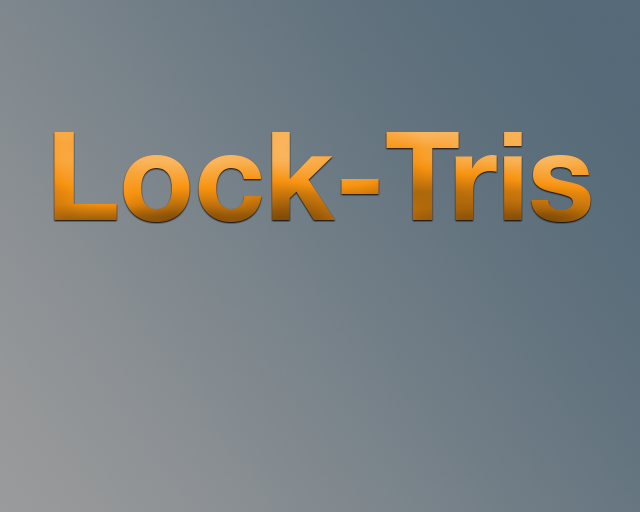
<style>
.page{position:relative;width:640px;height:512px}
.page>*{position:absolute;margin:0}
.t1{font:123px "HelveticaNeue-Bold"}
</style>
<div class="page">
<p class="t1" style="left:54px;top:132px;width:537px;height:90px">Lock-Tris</p>
</div>
